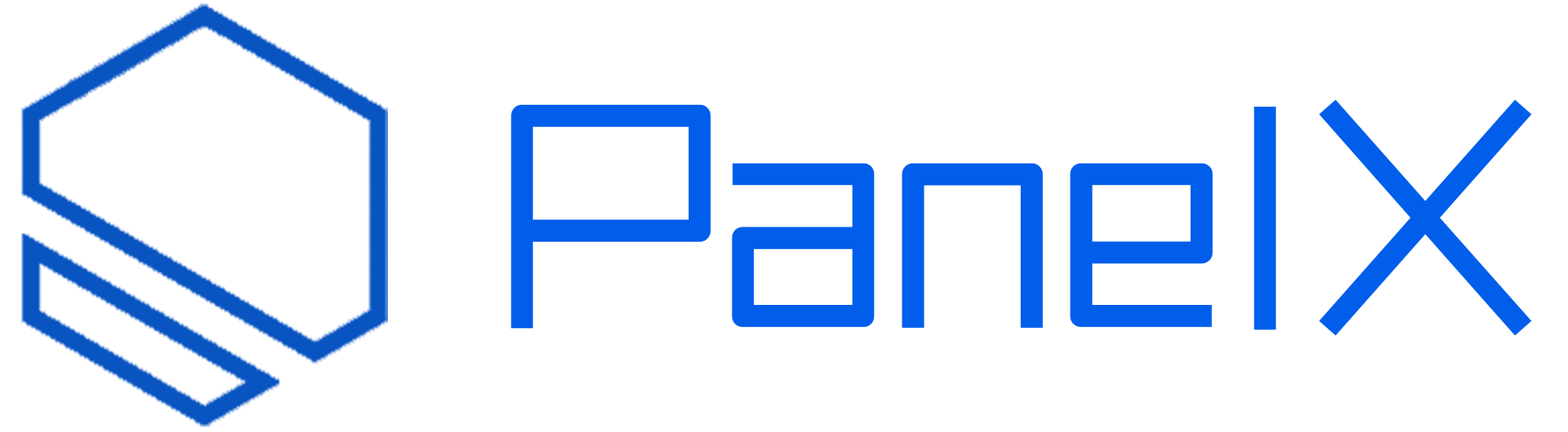
<style>
.page{position:relative;width:1568px;height:432px;background:#ffffff}
.page>*{position:absolute;margin:0}
.t1{font:278.1px "PangMenZhengDao-XiXian";color:#005eeb}
.t2{font:278.1px "PangMenZhengDao-XiXian";letter-spacing:0.025em;color:#005eeb}
</style>
<div class="page">
<p class="t1" style="left:511px;top:100px;width:1021px;height:236px">Pane<span class="t2">lX</span></p>
</div>
